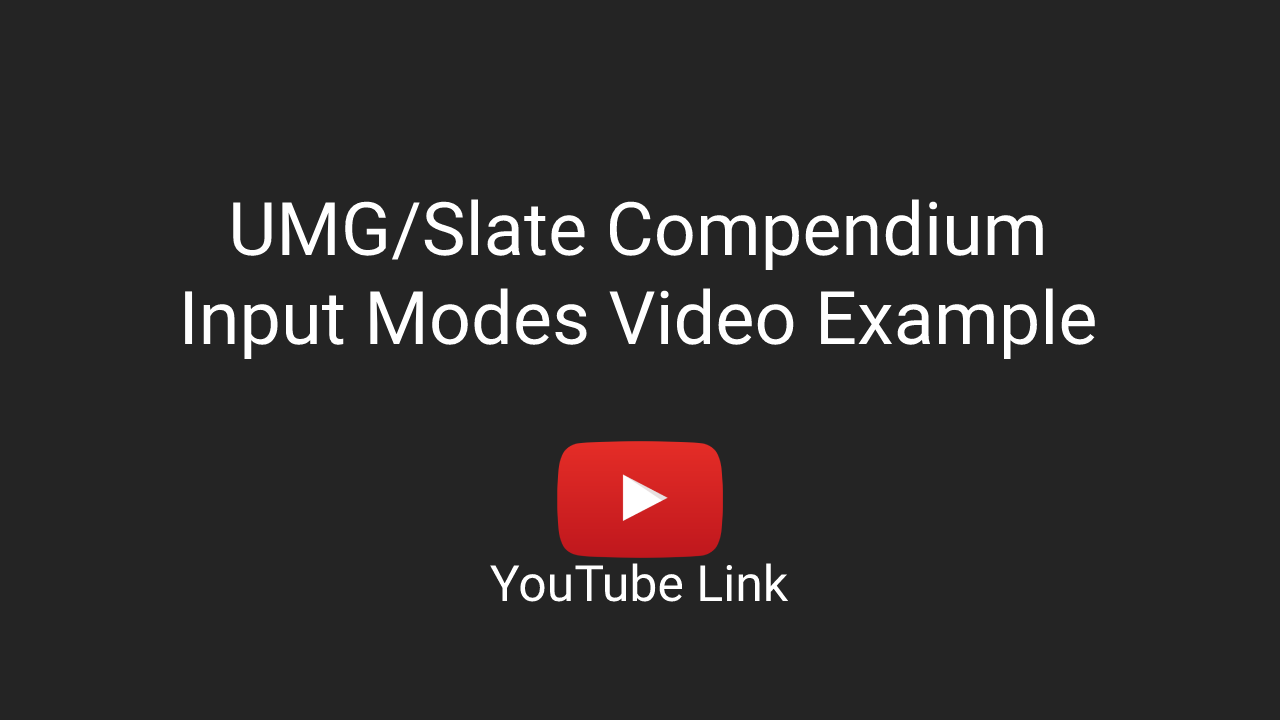
<style>
.page{position:relative;width:1280px;height:720px;background:#242424}
.page>*{position:absolute;margin:0}
.t1{font:74px "Roboto-Regular";color:#ffffff}
.t2{font:50px "Roboto-Regular";color:#ffffff}
</style>
<div class="page">
<p class="t1" style="left:185px;top:199px;width:910px;height:161px;text-align:center">UMG/Slate Compendium<br>Input Modes Video Example</p>
<p class="t2" style="left:490px;top:563px;width:299px;height:39px">YouTube Link</p>
</div>
